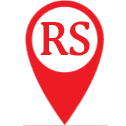
<style>
.page{position:relative;width:126px;height:126px;background:#ffffff}
.page>*{position:absolute;margin:0}
.t1{font:48.1px "CambriaMath";color:#ed1b24}
</style>
<div class="page">
<p class="t1" style="left:40px;top:22px;width:49px;height:34px">RS</p>
<p class="t1" style="left:41px;top:21px;width:49px;height:34px">RS</p>
</div>
